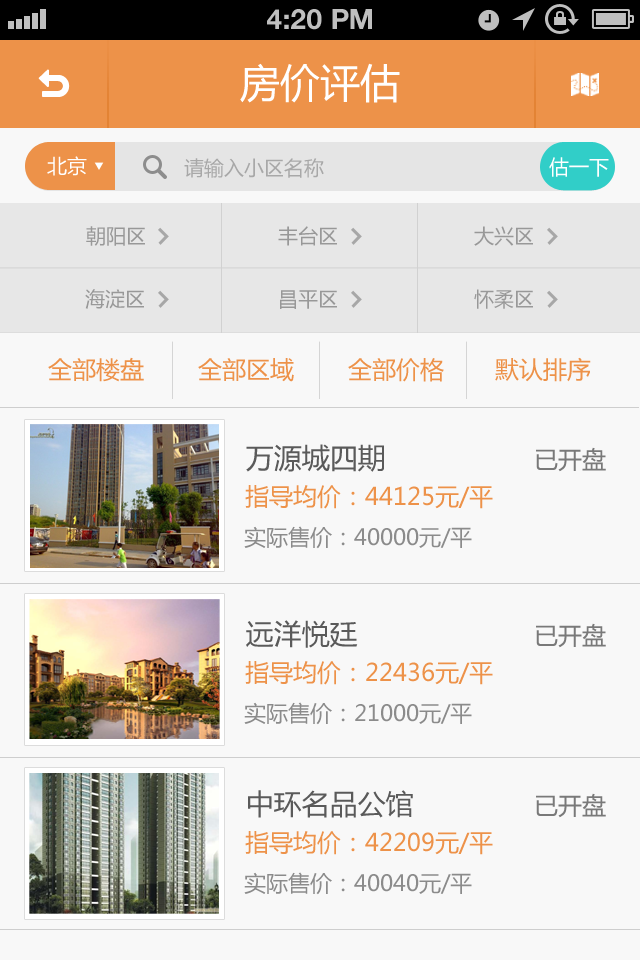
<style>
.page{position:relative;width:640px;height:960px;background:#f8f8f8}
.page>*{position:absolute;margin:0}
.t1{font:28px "HelveticaNeue-Bold";color:#bfbfbf;text-transform:uppercase}
.t2{font:40px "MicrosoftYaHei";color:#ffffff}
.t3{font:20px "MicrosoftYaHei";color:#ffffff}
.t4{font:20px "MicrosoftYaHei";color:#a8a8a8}
.t5{font:20px "MicrosoftYaHei";color:#989898}
.t6{font:24px "MicrosoftYaHei";color:#ed9249}
.t7{font:28px "MicrosoftYaHei";color:#5a5a5a}
.t8{font:24px "MicrosoftYaHei";color:#797979}
.t9{font:22px "MicrosoftYaHei";color:#8b8b8b}
</style>
<div class="page">
<p class="t1" style="left:267px;top:9px;width:105px;height:21px">4:20 PM</p>
<p class="t2" style="left:240px;top:63px;width:160px;height:40px">房价评估</p>
<p class="t3" style="left:47px;top:156px;width:40px;height:20px">北京</p>
<p class="t4" style="left:184px;top:158px;width:140px;height:20px">请输入小区名称</p>
<p class="t3" style="left:549px;top:157px;width:60px;height:20px">估一下</p>
<p class="t5" style="left:86px;top:226px;width:59px;height:20px">朝阳区</p>
<p class="t5" style="left:278px;top:226px;width:59px;height:20px">丰台区</p>
<p class="t5" style="left:474px;top:226px;width:59px;height:20px">大兴区</p>
<p class="t5" style="left:85px;top:289px;width:59px;height:20px">海淀区</p>
<p class="t5" style="left:280px;top:290px;width:57px;height:19px">昌平区</p>
<p class="t5" style="left:474px;top:289px;width:59px;height:20px">怀柔区</p>
<p class="t6" style="left:48px;top:357px;width:96px;height:25px">全部楼盘</p>
<p class="t6" style="left:198px;top:358px;width:96px;height:24px">全部区域</p>
<p class="t6" style="left:348px;top:358px;width:96px;height:24px">全部价格</p>
<p class="t6" style="left:495px;top:357px;width:96px;height:25px">默认排序</p>
<p class="t7" style="left:246px;top:444px;width:138px;height:28px">万源城四期</p>
<p class="t8" style="left:536px;top:447px;width:70px;height:25px">已开盘</p>
<p class="t6" style="left:245px;top:485px;width:248px;height:24px">指导均价：44125元/平</p>
<p class="t9" style="left:244px;top:526px;width:228px;height:23px">实际售价：40000元/平</p>
<p class="t7" style="left:246px;top:620px;width:112px;height:28px">远洋悦廷</p>
<p class="t8" style="left:536px;top:623px;width:70px;height:25px">已开盘</p>
<p class="t6" style="left:245px;top:661px;width:248px;height:24px">指导均价：22436元/平</p>
<p class="t9" style="left:244px;top:702px;width:228px;height:23px">实际售价：21000元/平</p>
<p class="t7" style="left:248px;top:790px;width:165px;height:28px">中环名品公馆</p>
<p class="t8" style="left:536px;top:793px;width:70px;height:25px">已开盘</p>
<p class="t6" style="left:245px;top:831px;width:248px;height:24px">指导均价：42209元/平</p>
<p class="t9" style="left:244px;top:872px;width:228px;height:23px">实际售价：40040元/平</p>
</div>
